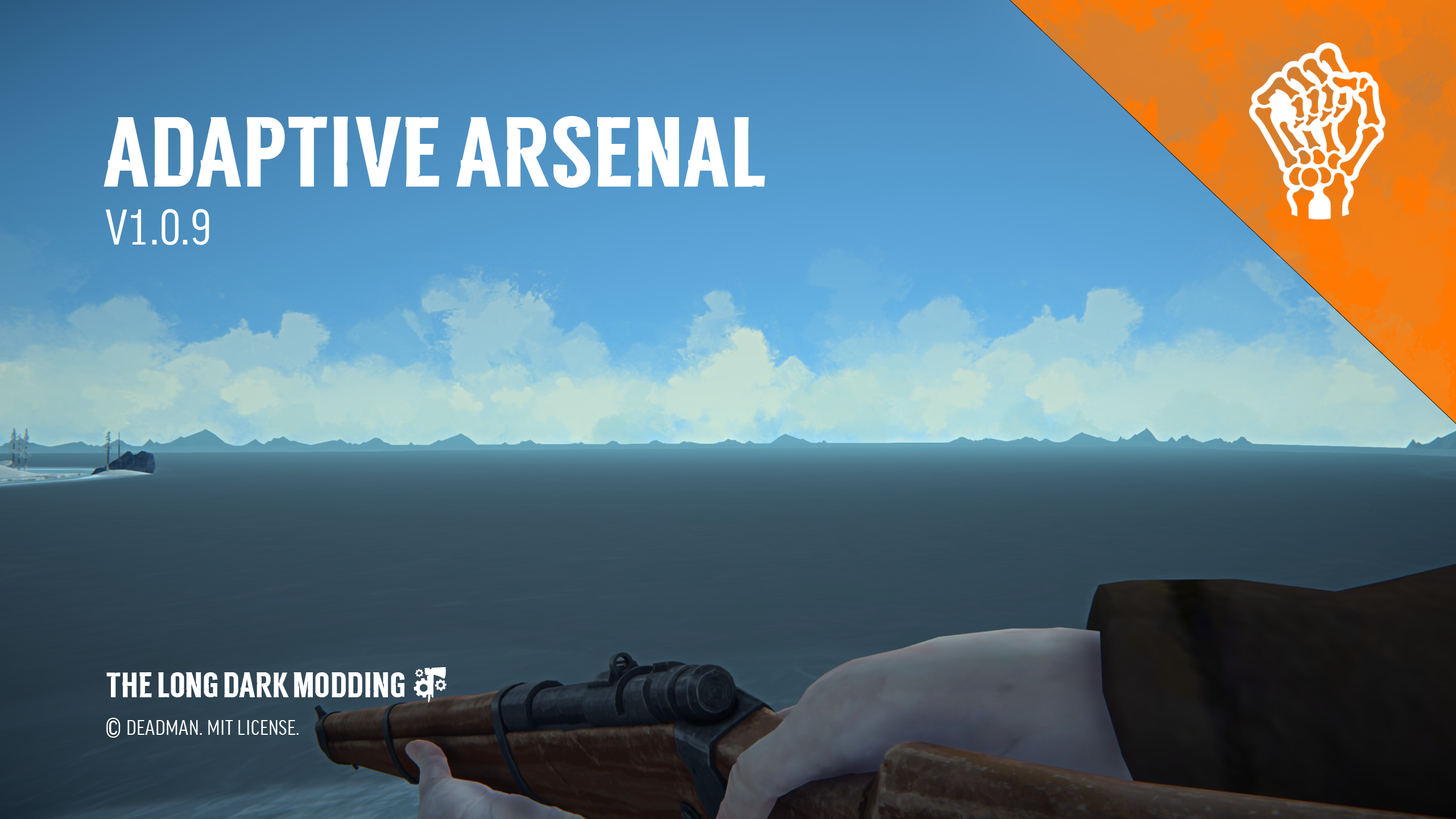
<style>
.page{position:relative;width:1456px;height:819px}
.page>*{position:absolute;margin:0}
.t1{font:99.5px "TLD_Headline_One_Test1.5";letter-spacing:0.01em;color:#ffffff}
.t2{font:48.3px "FFGoodProCond-News";letter-spacing:0.02em;color:#ffffff}
.t3{font:35.3px "TLD_Headline_One_Test1.5";letter-spacing:0.004em;color:#ffffff}
.t4{font:27.3px "FFGoodProCond-News";letter-spacing:0.015em;color:#ffffff}
.t5{font:20.5px "FFGoodProCond-News";letter-spacing:0.015em;color:#ffffff}
</style>
<div class="page">
<p class="t1" style="left:104px;top:116px;width:661px;height:72px">ADAPTIVE ARSENAL</p>
<p class="t2" style="left:105px;top:209px;width:104px;height:36px">V1.0.9</p>
<p class="t3" style="left:106px;top:672px;width:299px;height:25px">THE LONG DARK MODDING</p>
<p class="t4" style="left:106px;top:718px;width:15px;height:20px">©</p>
<p class="t5" style="left:127px;top:720px;width:172px;height:15px">DEADMAN. MIT LICENSE.</p>
</div>
